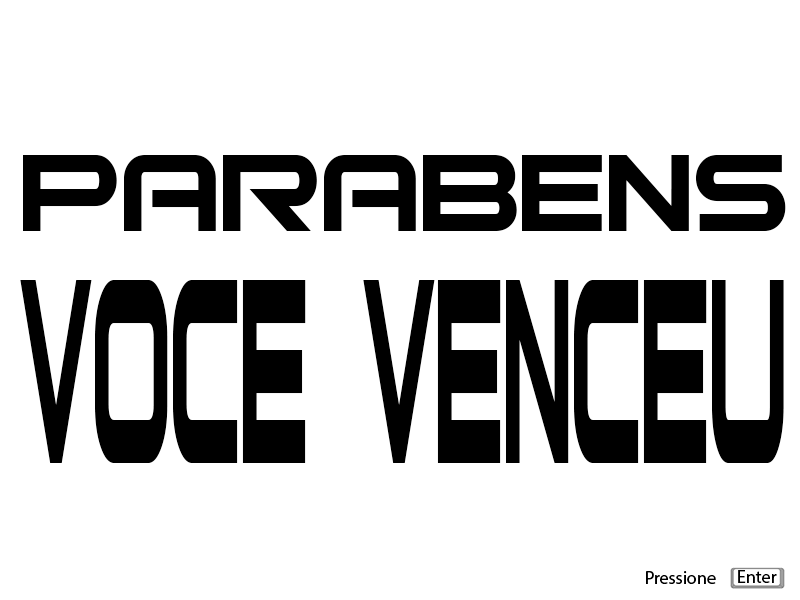
<style>
.page{position:relative;width:800px;height:600px;background:#ffffff}
.page>*{position:absolute;margin:0}
.t1{font:146.6px "Bitsumishi";color:#000000}
.t2{font:355.4px "Bitsumishi";color:#000000;scale:0.32 1}
.t3{font:18px "MyriadHebrew-Regular";color:#000000}
</style>
<div class="page">
<p class="t1" style="left:23px;top:155px;width:763px;height:76px">PARABENS</p>
<p class="t2" style="left:20px;top:280px;width:764px;height:183px">VOCE VENCEU</p>
<p class="t3" style="left:646px;top:571px;width:70px;height:13px">Pressione</p>
<p class="t3" style="left:738px;top:570px;width:39px;height:13px">Enter</p>
</div>
